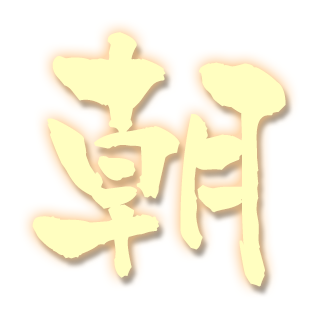
<style>
.page{position:relative;width:320px;height:320px;background:#ffffff}
.page>*{position:absolute;margin:0}
.t1{font:280px "KyoMadoka";color:#fffec0;font-weight:bold}
</style>
<div class="page">
<p class="t1" style="left:32px;top:32px;width:254px;height:255px">朝</p>
</div>
